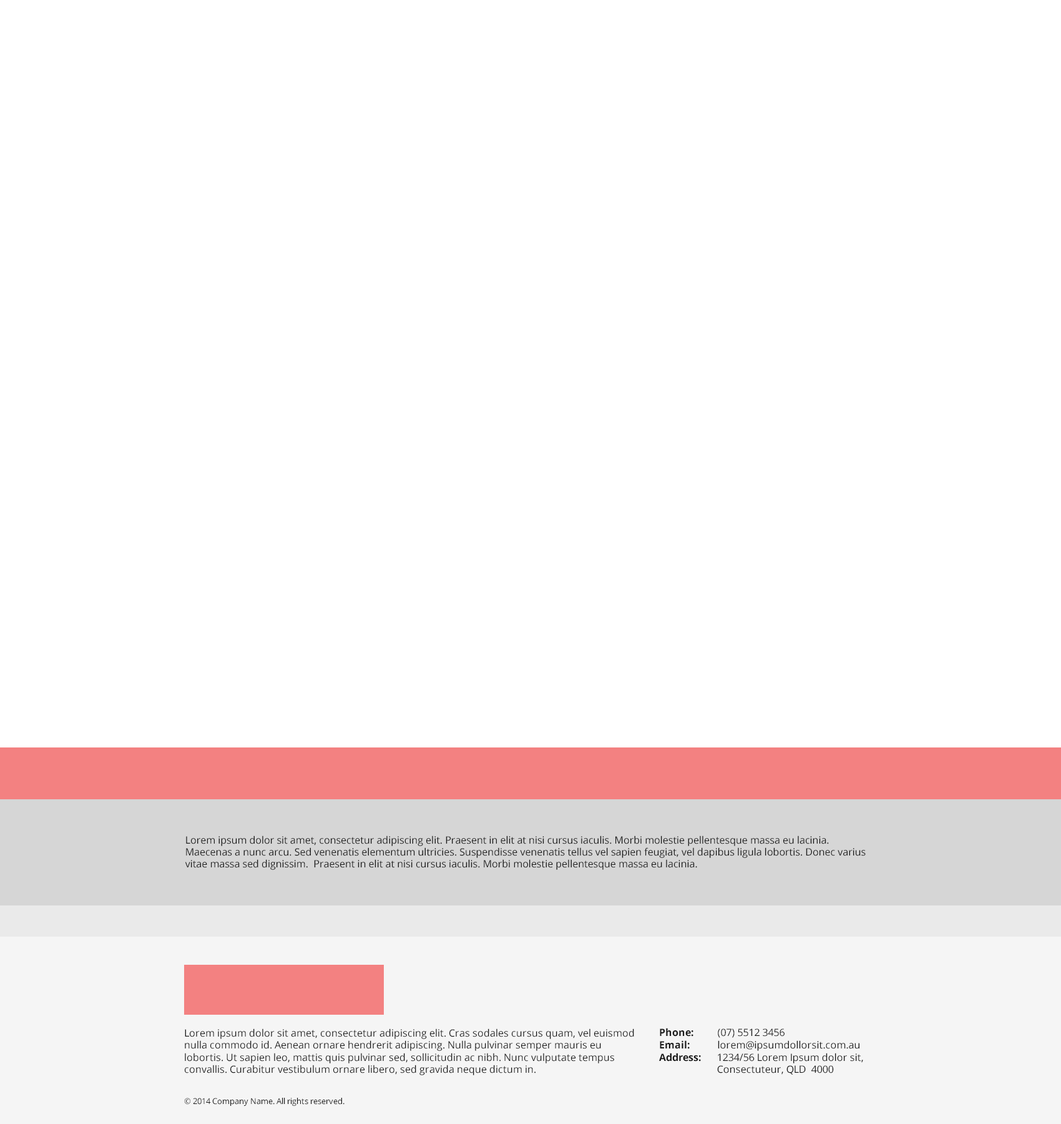
<style>
.page{position:relative;width:1061px;height:1124px;background:#ffffff}
.page>*{position:absolute;margin:0}
.t1{font:10px "OpenSans";color:#1a1a1a}
.t2{font:10px "OpenSans-Bold";color:#1a1a1a}
.t3{font:8.1px "OpenSans";color:#1a1a1a}
</style>
<div class="page">
<p class="t1" style="left:185px;top:835px;width:681px;height:35px">Lorem ipsum dolor sit amet, consectetur adipiscing elit. Praesent in elit at nisi cursus iaculis. Morbi molestie pellentesque massa eu lacinia. Maecenas a nunc arcu. Sed venenatis elementum ultricies. Suspendisse venenatis tellus vel sapien feugiat, vel dapibus ligula lobortis. Donec varius vitae massa sed dignissim.  Praesent in elit at nisi cursus iaculis. Morbi molestie pellentesque massa eu lacinia.</p>
<p class="t1" style="left:185px;top:1028px;width:449px;height:47px">Lorem ipsum dolor sit amet, consectetur adipiscing elit. Cras sodales cursus quam, vel euismod nulla commodo id. Aenean ornare hendrerit adipiscing. Nulla pulvinar semper mauris eu lobortis. Ut sapien leo, mattis quis pulvinar sed, sollicitudin ac nibh. Nunc vulputate tempus convallis. Curabitur vestibulum ornare libero, sed gravida neque dictum in.</p>
<p class="t2" style="left:660px;top:1028px;width:34px;height:8px">Phone:</p>
<p class="t1" style="left:718px;top:1028px;width:67px;height:9px">(07) 5512 3456</p>
<p class="t2" style="left:660px;top:1040px;width:30px;height:9px">Email:</p>
<p class="t1" style="left:718px;top:1040px;width:142px;height:11px">lorem@ipsumdollorsit.com.au</p>
<p class="t2" style="left:659px;top:1052px;width:42px;height:9px">Address:</p>
<p class="t1" style="left:717px;top:1052px;width:146px;height:22px">1234/56 Lorem Ipsum dolor sit,<br>Consectuteur, QLD  4000</p>
<p class="t3" style="left:184px;top:1097px;width:161px;height:9px">© 2014 Company Name. All rights reserved.</p>
</div>
